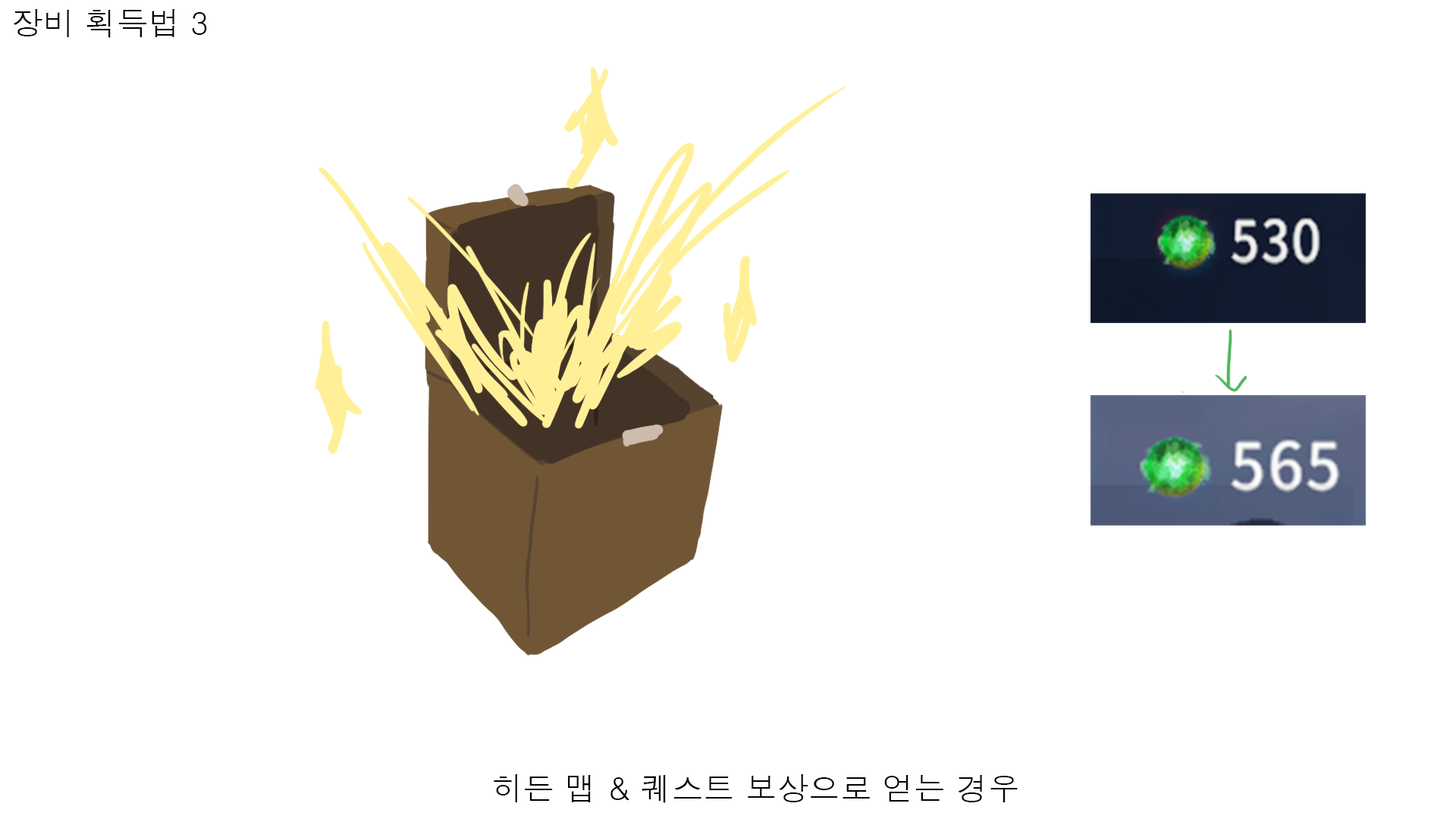
<style>
.page{position:relative;width:1456px;height:819px;background:#ffffff}
.page>*{position:absolute;margin:0}
.t1{font:31.6px "Dotum";color:#000000}
</style>
<div class="page">
<p class="t1" style="left:13px;top:9px;width:194px;height:29px">장비 획득법 3</p>
<p class="t1" style="left:494px;top:774px;width:524px;height:29px">히든 맵 &amp; 퀘스트 보상으로 얻는 경우</p>
</div>
